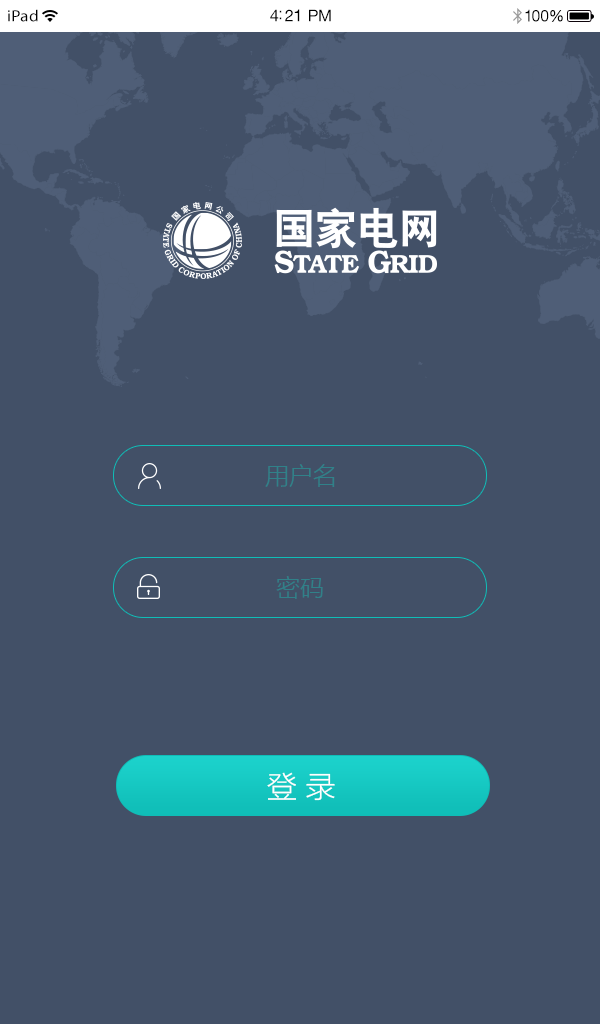
<style>
.page{position:relative;width:600px;height:1024px;background:#425067}
.page>*{position:absolute;margin:0}
.t1{font:16.2px "MyriadPro-Regular";letter-spacing:0.02em;color:#000000;scale:1.05 1}
.t2{font:16.3px "HelveticaNeueCE-Roman";letter-spacing:-0.02em;color:#000000}
.t3{font:16.2px "HelveticaNeueCE-Roman";letter-spacing:-0.02em;color:#010101;scale:0.96 1}
.t4{font:24px "MicrosoftYaHeiLight";color:#308189}
.t5{font:30px "MicrosoftYaHeiLight";color:#ffffff}
</style>
<div class="page">
<p class="t1" style="left:8px;top:9px;width:30px;height:13px">iPad</p>
<p class="t2" style="left:270px;top:9px;width:61px;height:13px">4:21 PM</p>
<p class="t3" style="left:525px;top:9px;width:38px;height:13px">100%</p>
<p class="t4" style="left:265px;top:464px;width:70px;height:23px">用户名</p>
<p class="t4" style="left:276px;top:576px;width:47px;height:23px">密码</p>
<p class="t5" style="left:267px;top:772px;width:68px;height:29px">登 录</p>
</div>
